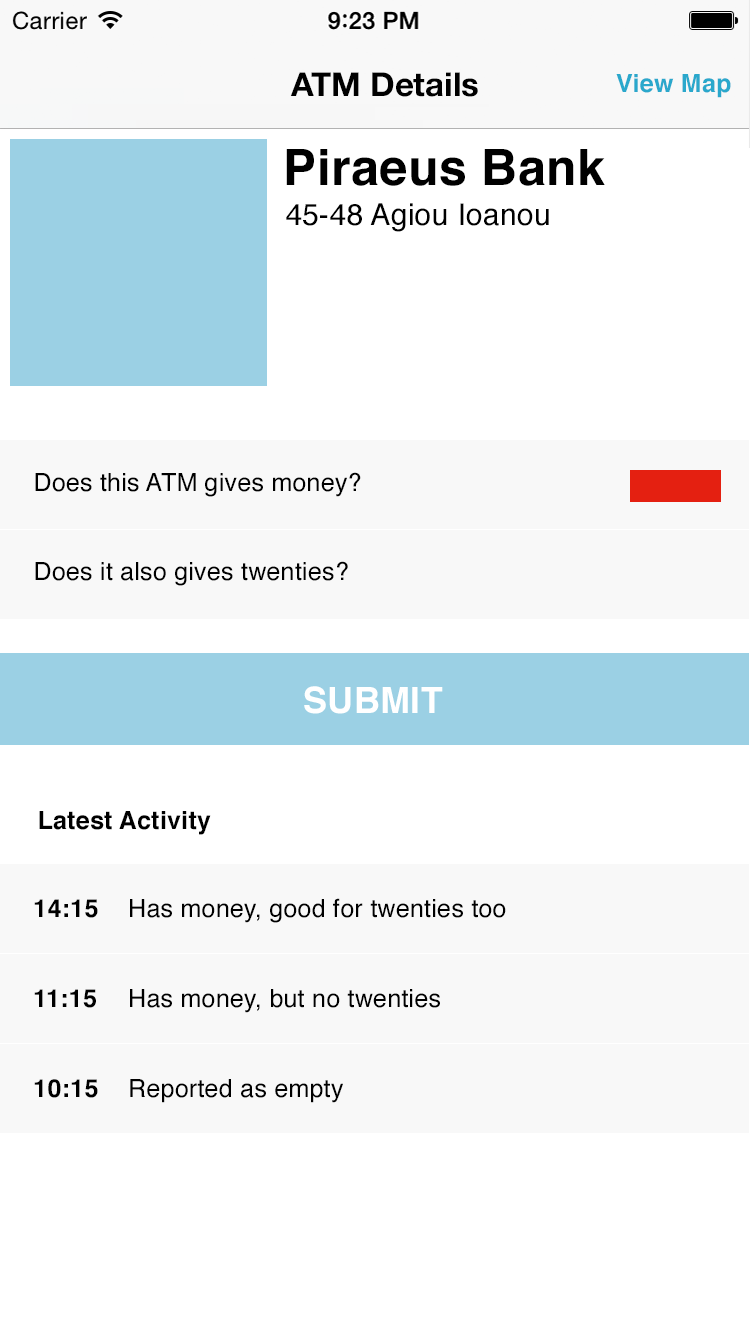
<style>
.page{position:relative;width:750px;height:1334px;background:#ffffff}
.page>*{position:absolute;margin:0}
.t1{font:33px "HelveticaNeue-Bold";color:#000000}
.t2{font:25px "Helvetica-Bold";letter-spacing:0.01em;color:#2aa8cc}
.t3{font:50px "Helvetica-Bold";letter-spacing:0.01em;color:#000000}
.t4{font:30px "Helvetica";letter-spacing:0.01em;color:#000000}
.t5{font:25px "Helvetica";letter-spacing:0.01em;color:#000000}
.t6{font:36px "Helvetica-Bold";letter-spacing:0.01em;color:#ffffff}
.t7{font:25px "Helvetica-Bold";letter-spacing:0.01em;color:#000000}
</style>
<div class="page">
<p class="t1" style="left:290px;top:72px;width:188px;height:25px">ATM Details</p>
<p class="t2" style="left:616px;top:74px;width:115px;height:24px">View Map</p>
<p class="t3" style="left:286px;top:149px;width:319px;height:37px">Piraeus Bank</p>
<p class="t4" style="left:286px;top:203px;width:263px;height:29px">45-48 Agiou Ioanou</p>
<p class="t5" style="left:35px;top:472px;width:326px;height:25px">Does this ATM gives money?</p>
<p class="t5" style="left:35px;top:561px;width:313px;height:25px">Does it also gives twenties?</p>
<p class="t6" style="left:304px;top:686px;width:139px;height:28px">SUBMIT</p>
<p class="t7" style="left:39px;top:811px;width:172px;height:24px">Latest Activity</p>
<p class="t7" style="left:34px;top:899px;width:64px;height:19px">14:15</p>
<p class="t5" style="left:130px;top:898px;width:376px;height:25px">Has money, good for twenties too</p>
<p class="t7" style="left:34px;top:989px;width:62px;height:19px">11:15</p>
<p class="t5" style="left:130px;top:989px;width:310px;height:24px">Has money, but no twenties</p>
<p class="t7" style="left:34px;top:1079px;width:64px;height:19px">10:15</p>
<p class="t5" style="left:130px;top:1079px;width:213px;height:24px">Reported as empty</p>
</div>
